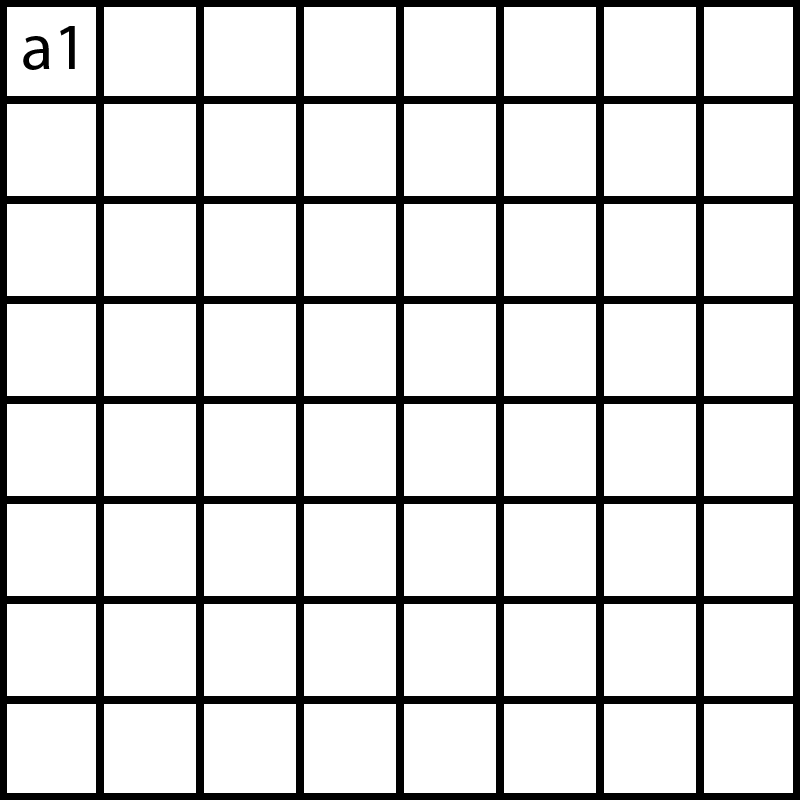
<style>
.page{position:relative;width:800px;height:800px;background:#ffffff}
.page>*{position:absolute;margin:0}
.t1{font:66.7px "MyriadPro-Regular";color:#000000}
</style>
<div class="page">
<p class="t1" style="left:23px;top:26px;width:52px;height:44px">a1</p>
</div>
